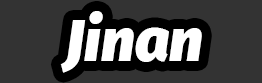
<style>
.page{position:relative;width:262px;height:83px;background:#333333}
.page>*{position:absolute;margin:0}
.t1{font:60px "FiraSans-BlackItalic";color:#ffffff}
</style>
<div class="page">
<p class="t1" style="left:60px;top:11px;width:142px;height:62px">Jinan</p>
</div>
